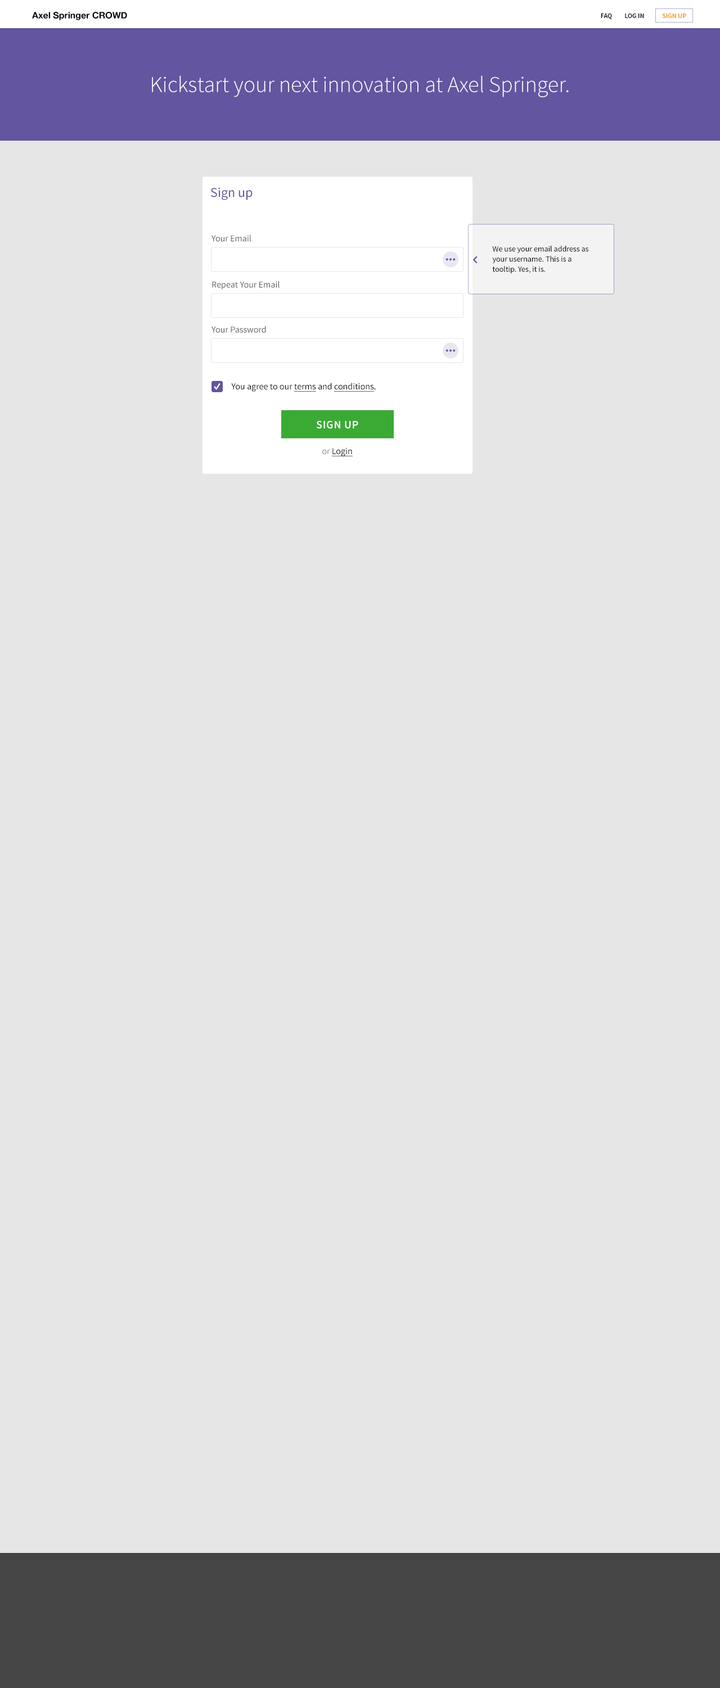
<style>
.page{position:relative;width:720px;height:1688px;background:#e6e6e6}
.page>*{position:absolute;margin:0}
.t1{font:9px "HelveticaNeue-Bold";color:#000000}
.t2{font:6.8px "SourceSansPro-Semibold";color:#000000;text-transform:uppercase}
.t3{font:6.8px "SourceSansPro-Semibold";color:#f39200;text-transform:uppercase}
.t4{font:22.5px "SourceSansPro-Light";color:#ffffff}
.t5{font:13.5px "SourceSansPro-Regular";color:#6455a0}
.t6{font:9px "SourceSansPro-Regular";color:#585858}
.t7{font:7.9px/10.1px "SourceSansPro-Regular";color:#000000}
.t8{font:9px "SourceSansPro-Regular";color:#000000}
.t9{font:9px "SourceSansPro-Regular";color:#000000;text-decoration:underline}
.t10{font:11.2px "SourceSansPro-Semibold";letter-spacing:0.032em;color:#ffffff;text-transform:uppercase}
.t11{font:9px "SourceSansPro-Regular";color:#868686}
</style>
<div class="page">
<p class="t1" style="left:32px;top:12px;width:95px;height:8px">Axel Springer CROWD</p>
<p class="t2" style="left:601px;top:14px;width:85px;height:5px">FAQ         Log IN             <span class="t3">Sign Up</span></p>
<p class="t4" style="left:152px;top:75px;width:417px;height:22px">Kickstart your next innovation at Axel Springer.</p>
<p class="t5" style="left:211px;top:187px;width:42px;height:13px">Sign up</p>
<p class="t6" style="left:212px;top:235px;width:39px;height:7px">Your Email</p>
<p class="t7" style="left:492px;top:245px;width:96px;height:28px">We use your email address as your username. This is a tooltip. Yes, it is.</p>
<p class="t6" style="left:212px;top:281px;width:68px;height:9px">Repeat Your Email</p>
<p class="t6" style="left:212px;top:326px;width:54px;height:7px">Your Password</p>
<p class="t8" style="left:231px;top:382px;width:145px;height:10px">You agree to our <span class="t9">terms </span>and <span class="t9">conditions</span>.</p>
<p class="t10" style="left:317px;top:421px;width:41px;height:8px">Sign up</p>
<p class="t9" style="left:322px;top:448px;width:31px;height:8px"><span class="t11">or </span>Login</p>
</div>
